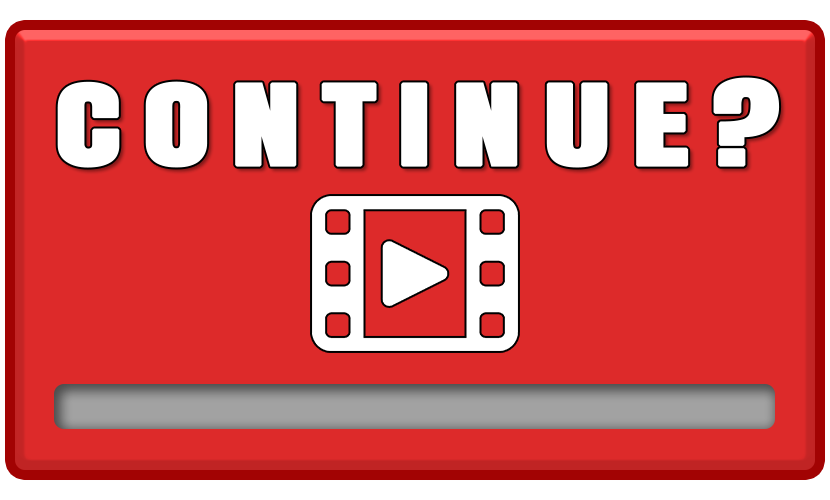
<style>
.page{position:relative;width:830px;height:500px;background:#dd2a2a}
.page>*{position:absolute;margin:0}
.t1{font:104.2px "Anton";letter-spacing:0.125em;color:#ffffff;font-weight:bold;scale:1.32 1}
</style>
<div class="page">
<p class="t1" style="left:57px;top:77px;width:723px;height:91px">CONTINUE?</p>
</div>
